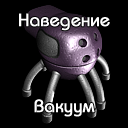
<style>
.page{position:relative;width:128px;height:128px;background:#000000}
.page>*{position:absolute;margin:0}
.t1{font:18px "BauhausC-Medium";color:#ffffff;font-weight:bold}
</style>
<div class="page">
<p class="t1" style="left:19px;top:13px;width:91px;height:18px">Наведение</p>
<p class="t1" style="left:34px;top:99px;width:61px;height:18px">Вакуум</p>
</div>
